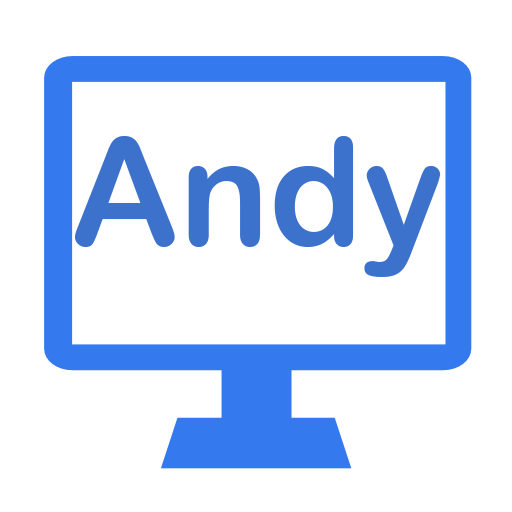
<style>
.page{position:relative;width:512px;height:512px;background:#ffffff}
.page>*{position:absolute;margin:0}
.t1{font:150px "ArialRoundedMTBold";color:#3c72cb}
</style>
<div class="page">
<p class="t1" style="left:75px;top:136px;width:366px;height:141px">Andy</p>
</div>
